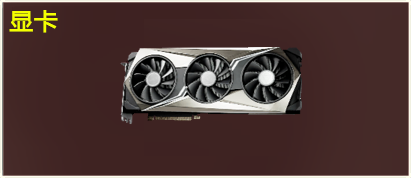
<style>
.page{position:relative;width:411px;height:178px}
.page>*{position:absolute;margin:0}
.t1{font:24px "MicrosoftYaHeiUI";color:#f4ff00;font-weight:bold}
</style>
<div class="page">
<p class="t1" style="left:9px;top:10px;width:49px;height:23px">显卡</p>
</div>
